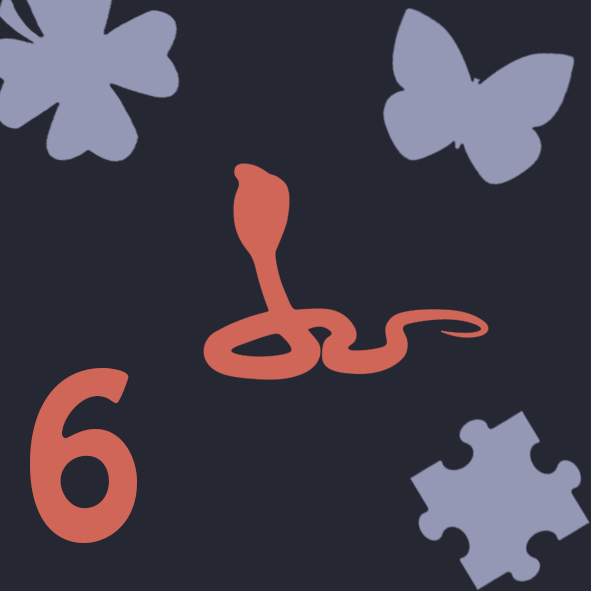
<style>
.page{position:relative;width:591px;height:591px;background:#252733}
.page>*{position:absolute;margin:0}
.t1{font:208.3px "HoboStd";color:#d06658}
</style>
<div class="page">
<p class="t1" style="left:30px;top:368px;width:107px;height:175px">6</p>
</div>
